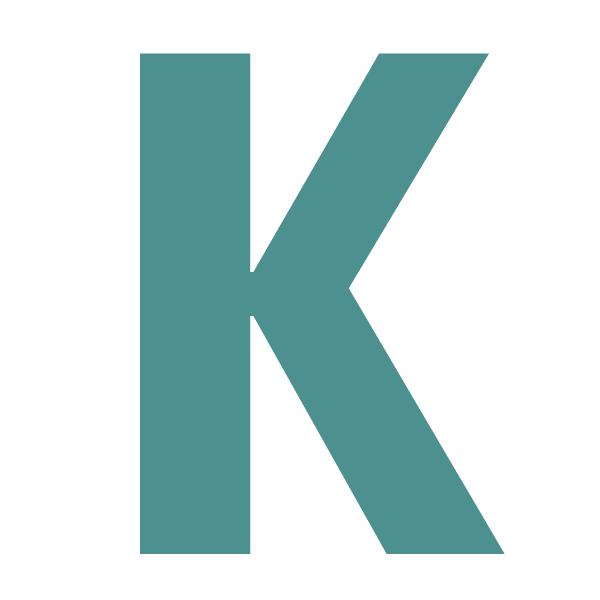
<style>
.page{position:relative;width:600px;height:600px;background:#ffffff}
.page>*{position:absolute;margin:0}
.t1{font:600px "FjallaOne-Regular";color:#4d9090;scale:1.45 1}
</style>
<div class="page">
<p class="t1" style="left:140px;top:53px;width:365px;height:501px">K</p>
</div>
